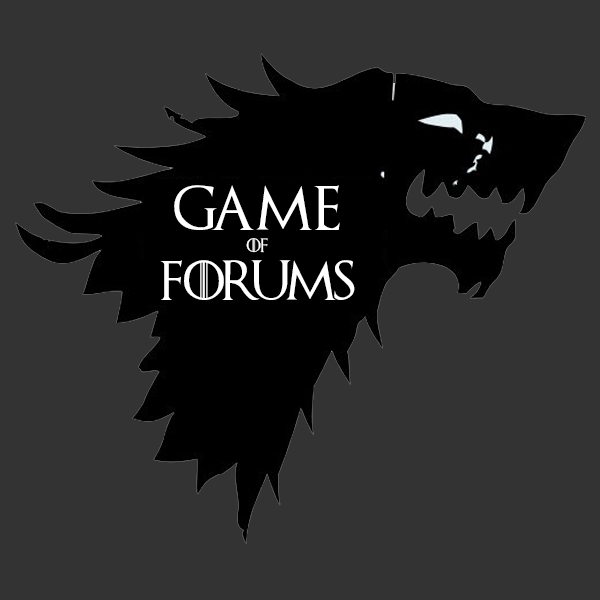
<style>
.page{position:relative;width:600px;height:600px;background:#333333}
.page>*{position:absolute;margin:0}
.t1{font:44.6px "GameofThrones";color:#ffffff}
.t2{font:13.8px "GameofThrones";color:#ffffff}
.t3{font:39.6px "GameofThrones";color:#ffffff}
</style>
<div class="page">
<p class="t1" style="left:174px;top:185px;width:166px;height:45px">Game</p>
<p class="t2" style="left:246px;top:238px;width:22px;height:15px">of</p>
<p class="t3" style="left:160px;top:260px;width:195px;height:40px">Forums</p>
</div>
